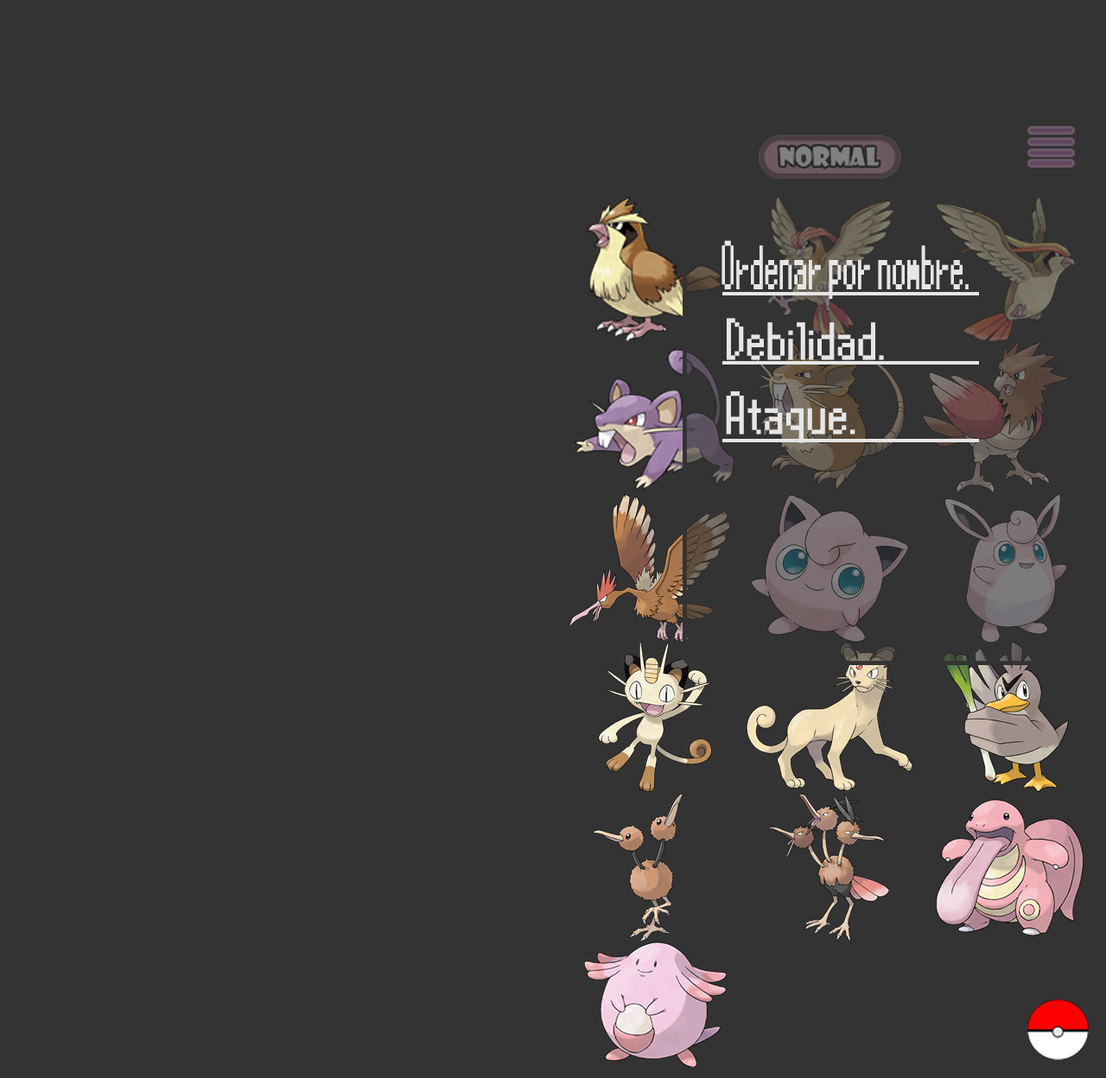
<style>
.page{position:relative;width:1106px;height:1078px;background:#333333}
.page>*{position:absolute;margin:0}
.t1{font:53.2px "Pokemon-X-and-Y";color:#e6e6e6;scale:0.6 1}
.t2{font:45.4px "Pokemon-X-and-Y";color:#e6e6e6}
.t3{font:46.9px "Pokemon-X-and-Y";color:#e6e6e6}
</style>
<div class="page">
<p class="t1" style="left:721px;top:240px;width:248px;height:59px">Ordenar por nombre.</p>
<p class="t2" style="left:727px;top:318px;width:157px;height:42px">Debilidad.</p>
<p class="t3" style="left:726px;top:391px;width:129px;height:52px">Ataque.</p>
</div>
